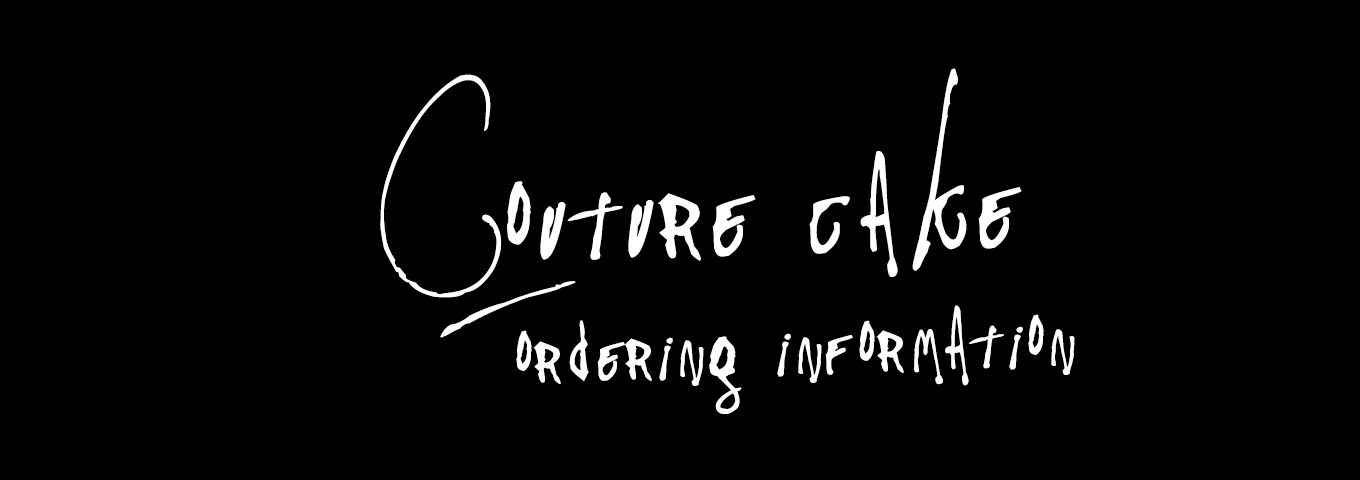
<style>
.page{position:relative;width:1360px;height:480px;background:#000000}
.page>*{position:absolute;margin:0}
.t1{font:299.3px "Pappo'sBluesBandOfficialFont";letter-spacing:0.024em;color:#ffffff}
.t2{font:188.8px "Pappo'sBluesBandOfficialFont";letter-spacing:0.024em;color:#ffffff}
</style>
<div class="page">
<p class="t1" style="left:380px;top:68px;width:642px;height:270px;rotate:-2deg">Couture cake</p>
<p class="t2" style="left:516px;top:305px;width:559px;height:109px;rotate:-2deg">ordering information</p>
</div>
